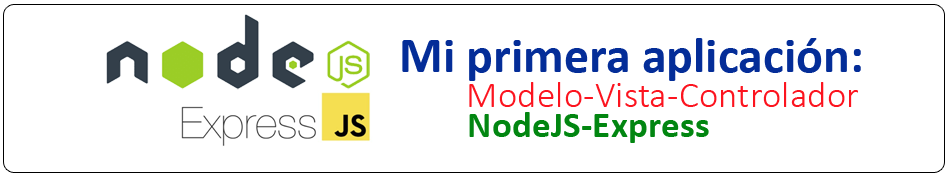
<style>
.page{position:relative;width:950px;height:178px;background:#ffffff}
.page>*{position:absolute;margin:0}
.t1{font:50px "Calibri-Bold";color:#042d98}
.t2{font:37.5px "Calibri-Light";color:#fc141f}
.t3{font:37.5px "Calibri-Bold";color:#028611}
</style>
<div class="page">
<p class="t1" style="left:402px;top:38px;width:459px;height:43px">Mi primera aplicación:</p>
<p class="t2" style="left:469px;top:82px;width:389px;height:25px">Modelo-Vista-Controlador</p>
<p class="t3" style="left:469px;top:112px;width:240px;height:31px">NodeJS-Express</p>
</div>
